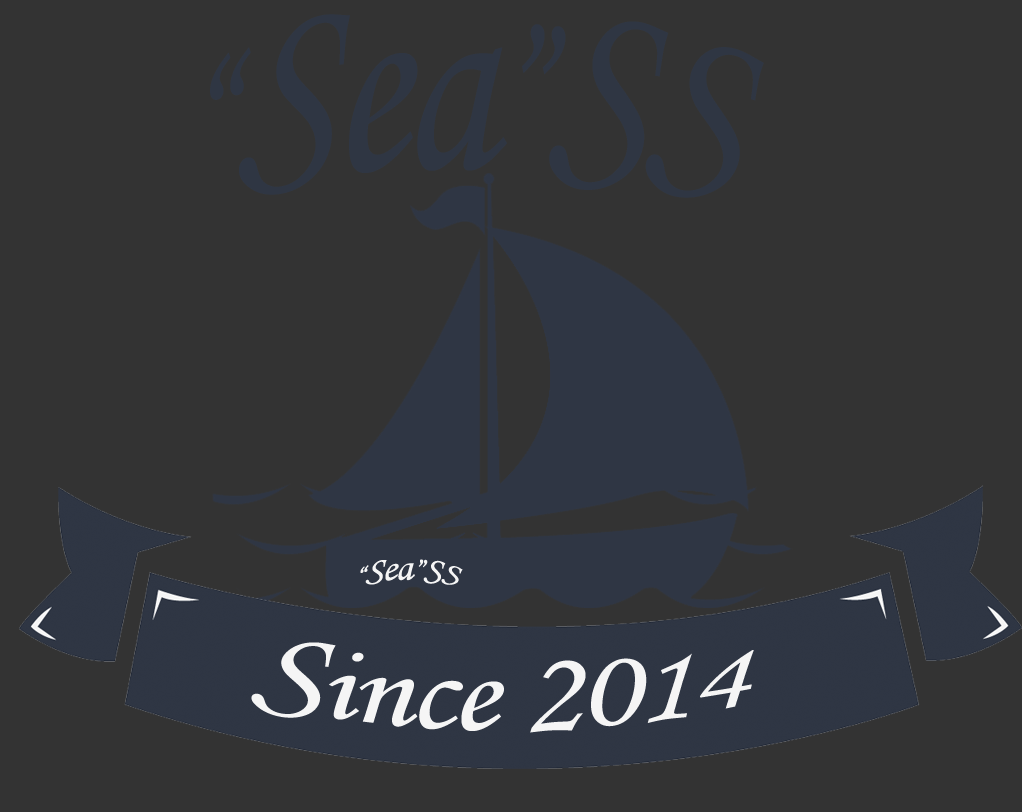
<style>
.page{position:relative;width:1022px;height:812px;background:#333333}
.page>*{position:absolute;margin:0}
.t1{font:140.8px "MonotypeCorsiva";letter-spacing:-0.025em;color:#2f3643;scale:1.55 1}
.t2{font:105.6px "MonotypeCorsiva";letter-spacing:-0.025em;color:#2f3643;scale:1.55 1}
.t3{font:26.4px "MonotypeCorsiva";letter-spacing:-0.025em;color:#f5f5f5;scale:1.55 1}
.t4{font:21.1px "MonotypeCorsiva";letter-spacing:-0.025em;color:#f5f5f5;scale:1.55 1}
.t5{font:88px "MonotypeCorsiva";letter-spacing:-0.025em;color:#f5f5f5;scale:1.55 1}
.t6{font:105.6px "MonotypeCorsiva";letter-spacing:-0.025em;color:#f5f5f5;scale:1.55 1}
</style>
<div class="page">
<p class="t1" style="left:210px;top:14px;width:554px;height:184px"><span class="t2">“</span>Sea<span class="t2">”</span>SS</p>
<p class="t3" style="left:360px;top:559px;width:103px;height:26px"><span class="t4">“</span>Sea<span class="t4">”</span>SS</p>
<p class="t5" style="left:251px;top:642px;width:503px;height:91px"><span class="t6">S</span>ince 2014</p>
</div>
